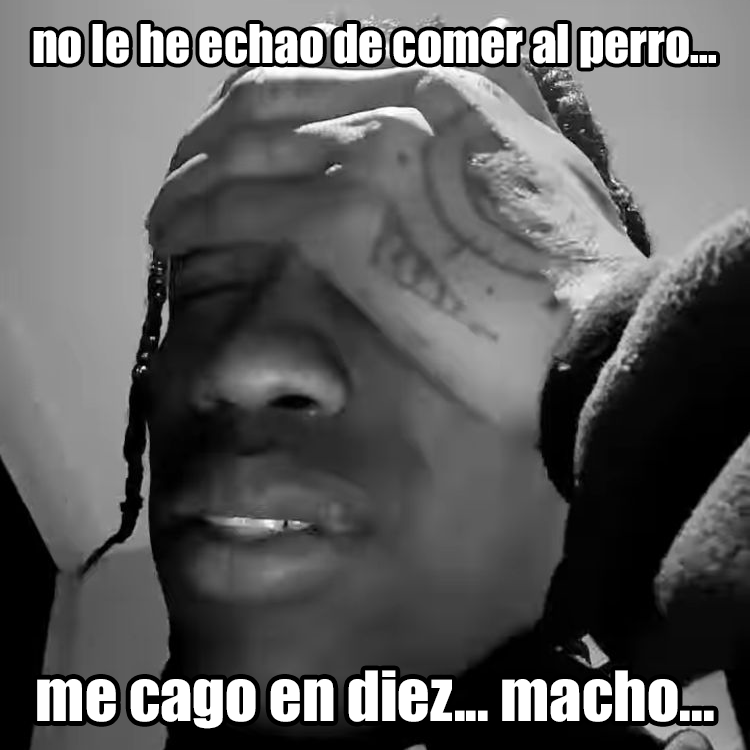
<style>
.page{position:relative;width:750px;height:750px}
.page>*{position:absolute;margin:0}
.t1{font:49.3px "Impact";color:#ffffff}
.t2{font:63.8px "Impact";color:#ffffff}
</style>
<div class="page">
<p class="t1" style="left:33px;top:24px;width:683px;height:44px">no le he echao de comer al perro...</p>
<p class="t2" style="left:37px;top:670px;width:677px;height:59px">me cago en diez... macho...</p>
</div>
